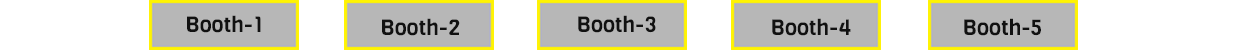
<style>
.page{position:relative;width:1250px;height:50px;background:#ffffff}
.page>*{position:absolute;margin:0}
.t1{font:21.8px "Viga-Regular";color:#111111}
</style>
<div class="page">
<p class="t1" style="left:187px;top:15px;width:74px;height:18px">Booth-1</p>
<p class="t1" style="left:578px;top:15px;width:78px;height:18px">Booth-3</p>
<p class="t1" style="left:382px;top:18px;width:78px;height:18px">Booth-2</p>
<p class="t1" style="left:772px;top:18px;width:79px;height:18px">Booth-4</p>
<p class="t1" style="left:964px;top:18px;width:77px;height:18px">Booth-5</p>
</div>
